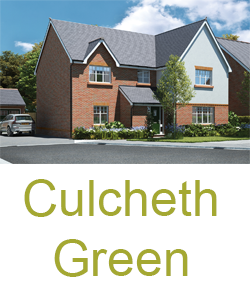
<style>
.page{position:relative;width:250px;height:300px;background:#ffffff}
.page>*{position:absolute;margin:0}
.t1{font:50px "ArialMT";color:#a4a832}
</style>
<div class="page">
<p class="t1" style="left:24px;top:179px;width:193px;height:98px;text-align:center">Culcheth<br>Green</p>
</div>
